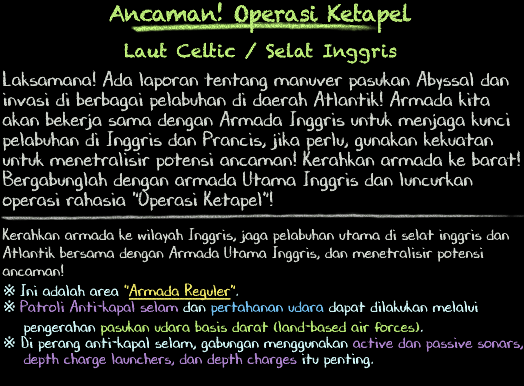
<style>
.page{position:relative;width:524px;height:386px;background:#000000}
.page>*{position:absolute;margin:0}
.t1{font:18px/36px "Chalkduster";color:#b7e674}
.t2{font:22px/36px "Chalkduster";letter-spacing:-0.04em;color:#b7e674}
.t3{font:20px/20px "DJBChalkItUp";color:#d9ded6}
.t4{font:16px/18px "DJBChalkItUp";color:#d9ded6}
.t5{font:16px/20px "TimesNewRomanPSMT";color:#d7feff}
.t6{font:16px/18px "DJBChalkItUp";color:#d7feff}
.t7{font:16px/18px "DJBChalkItUp";color:#f5ed68}
.t8{font:16px/18px "DJBChalkItUp";color:#f5ed68;text-decoration:underline}
.t9{font:16px/16px "TimesNewRomanPSMT";color:#d7feff}
.t10{font:16px/16px "DJBChalkItUp";color:#b489d6}
.t11{font:16px/16px "DJBChalkItUp";color:#d7feff}
.t12{font:16px/16px "DJBChalkItUp";color:#76c8fb}
.t13{font:16px/16px "DJBChalkItUp";color:#bdef78}
.t14{font:16px/20px "DJBChalkItUp";color:#d7feff}
</style>
<div class="page">
<p class="t1" style="left:109px;top:2px;width:303px;height:62px;text-align:center"><span class="t2">Ancaman! Operasi Ketapel<br></span>Laut Celtic / Selat Inggris</p>
<p class="t3" style="left:2px;top:70px;width:522px;height:299px">Laksamana! Ada laporan tentang manuver pasukan Abyssal dan<br>invasi di berbagai pelabuhan di daerah Atlantik! Armada kita<br>akan bekerja sama dengan Armada Inggris untuk menjaga kunci<br>pelabuhan di Inggris dan Prancis, jika perlu, gunakan kekuatan<br>untuk menetralisir potensi ancaman! Kerahkan armada ke barat!<br>Bergabunglah dengan armada Utama Inggris dan luncurkan<br>operasi rahasia "Operasi Ketapel"!<br><br><span class="t4">Kerahkan armada ke wilayah Inggris, jaga pelabuhan utama di selat inggris dan<br>Atlantik bersama dengan Armada Utama Inggris, dan menetralisir potensi<br>ancaman!<br></span><span class="t5">※ </span><span class="t6">Ini adalah area </span><span class="t7">"</span><span class="t8">Armada Reguler</span><span class="t7">"</span><span class="t6">.<br></span><span class="t9">※ </span><span class="t10">Patroli Anti-kapal selam </span><span class="t11">dan </span><span class="t12">pertahanan udara </span><span class="t11">dapat dilakukan melalui<br>　 pengerahan </span><span class="t13">pasukan udara basis darat (land-based air forces)</span><span class="t14">.<br></span><span class="t9">※ </span><span class="t11">Di perang anti-kapal selam, gabungan menggunakan </span><span class="t10">active dan passive sonars,<br>　 depth charge launchers, dan depth charges </span><span class="t11">itu penting.</span></p>
</div>
